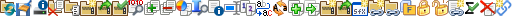
<style>
.page{position:relative;width:512px;height:16px;background:#ffffff}
.page>*{position:absolute;margin:0}
.t1{font:10px "Verdana";color:#000000;scale:0.7 1}
</style>
<div class="page">
<p class="t1" style="left:273px;top:4px;width:14px;height:7px">A  a</p>
</div>
